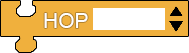
<style>
.page{position:relative;width:189px;height:53px;background:#ffffff}
.page>*{position:absolute;margin:0}
.t1{font:20.8px "ArialMT";color:#ffffff}
</style>
<div class="page">
<p class="t1" style="left:44px;top:13px;width:44px;height:15px">HOP</p>
</div>
